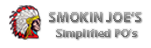
<style>
.page{position:relative;width:151px;height:48px;background:#ffffff}
.page>*{position:absolute;margin:0}
.t1{font:14.7px "MyriadPro-Bold"}
.t2{font:11px "MyriadPro-Bold";letter-spacing:0.05em}
</style>
<div class="page">
<p class="t1" style="left:49px;top:12px;width:92px;height:10px">SMOKIN JOE’S</p>
<p class="t2" style="left:56px;top:29px;width:81px;height:10px">Simplified PO’s</p>
</div>
